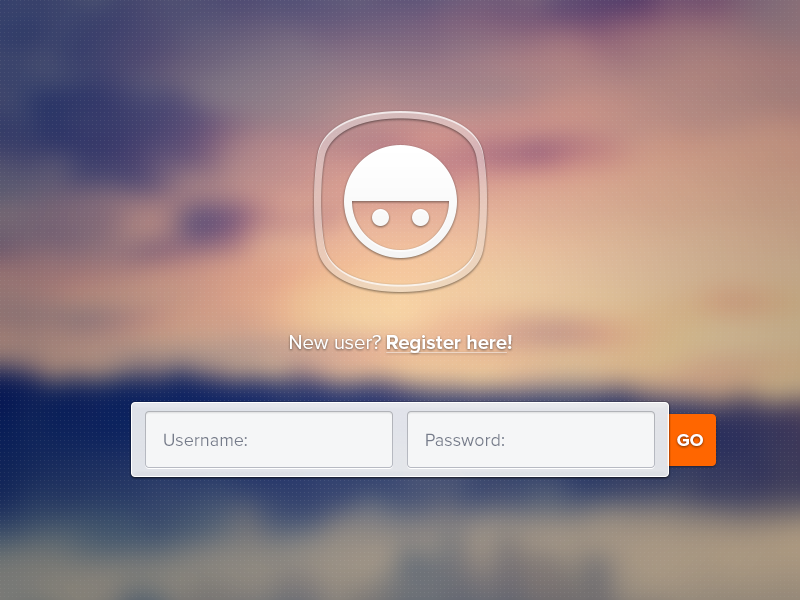
<style>
.page{position:relative;width:800px;height:600px}
.page>*{position:absolute;margin:0}
.t1{font:20px "ProximaNova-Bold";color:#ffffff;text-decoration:underline}
.t2{font:20px "ProximaNova-Regular";color:#ffffff}
.t3{font:20px "ProximaNova-Bold";color:#ffffff}
.t4{font:18px "ProximaNova-Regular";color:#767c8b}
.t5{font:18px "ProximaNova-Bold";color:#ffffff;text-transform:uppercase}
</style>
<div class="page">
<p class="t1" style="left:290px;top:335px;width:222px;height:18px"><span class="t2">New user? </span>Register here<span class="t3">!</span></p>
<p class="t4" style="left:164px;top:433px;width:83px;height:13px">Username:</p>
<p class="t4" style="left:426px;top:433px;width:78px;height:13px">Password:</p>
<p class="t5" style="left:677px;top:434px;width:26px;height:12px">GO</p>
</div>
